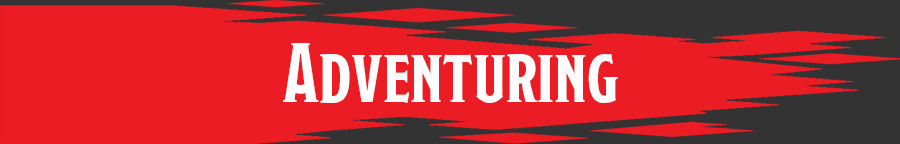
<style>
.page{position:relative;width:900px;height:144px;background:#eb1c23}
.page>*{position:absolute;margin:0}
.t1{font:84px "ModestoCondensed-Bold";color:#fefcfc}
</style>
<div class="page">
<p class="t1" style="left:283px;top:43px;width:335px;height:60px">Adventuring</p>
</div>
